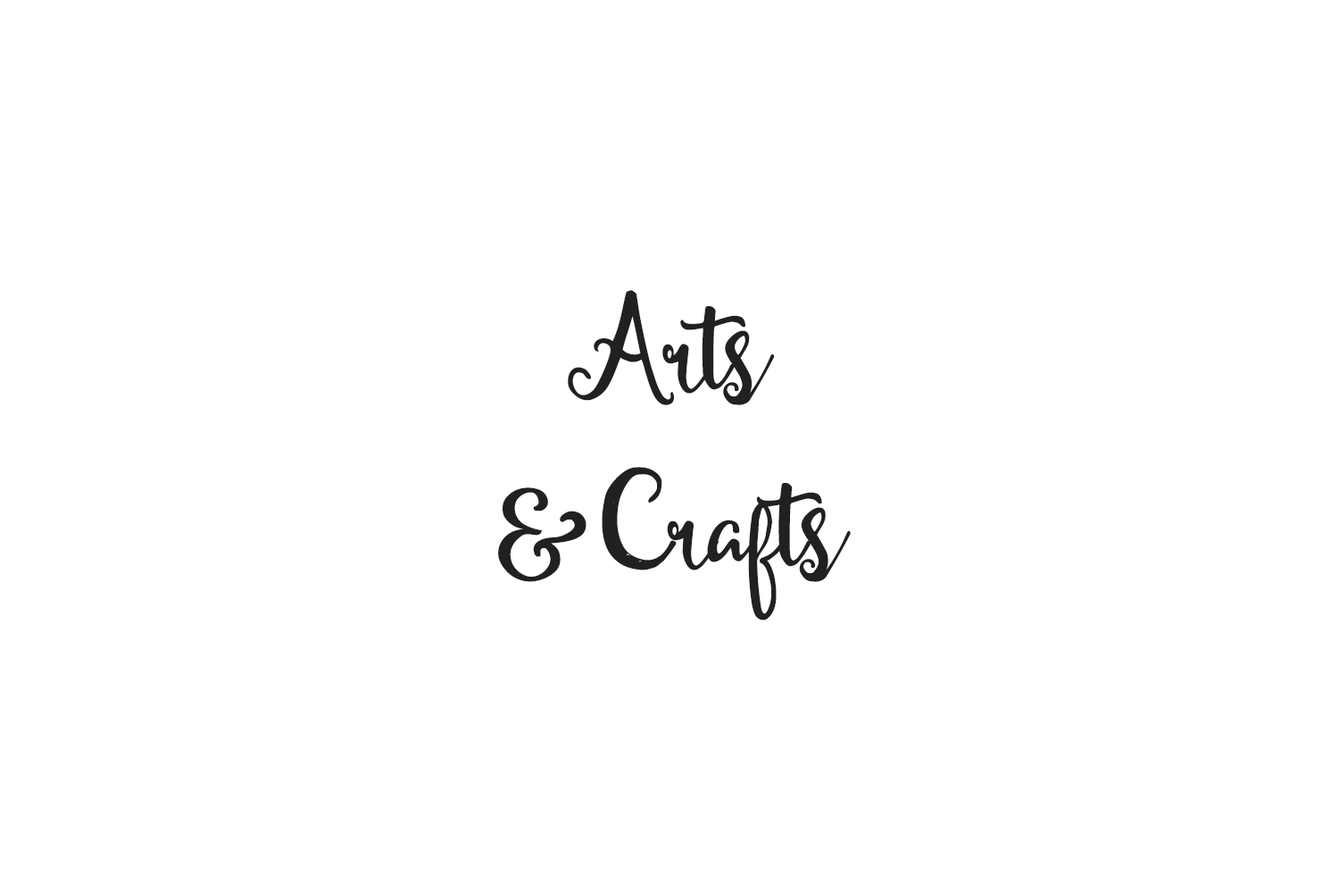
<style>
.page{position:relative;width:1339px;height:890px;background:#ffffff}
.page>*{position:absolute;margin:0}
.t1{font:147.3px "Michael";color:#212121}
</style>
<div class="page">
<p class="t1" style="left:498px;top:290px;width:353px;height:331px;text-align:center">Arts <br>&amp; Crafts</p>
</div>
